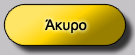
<style>
.page{position:relative;width:135px;height:55px}
.page>*{position:absolute;margin:0}
.t1{font:14.7px "ArialMT";color:#000000}
</style>
<div class="page">
<p class="t1" style="left:45px;top:19px;width:42px;height:14px">Άκυρο</p>
</div>
